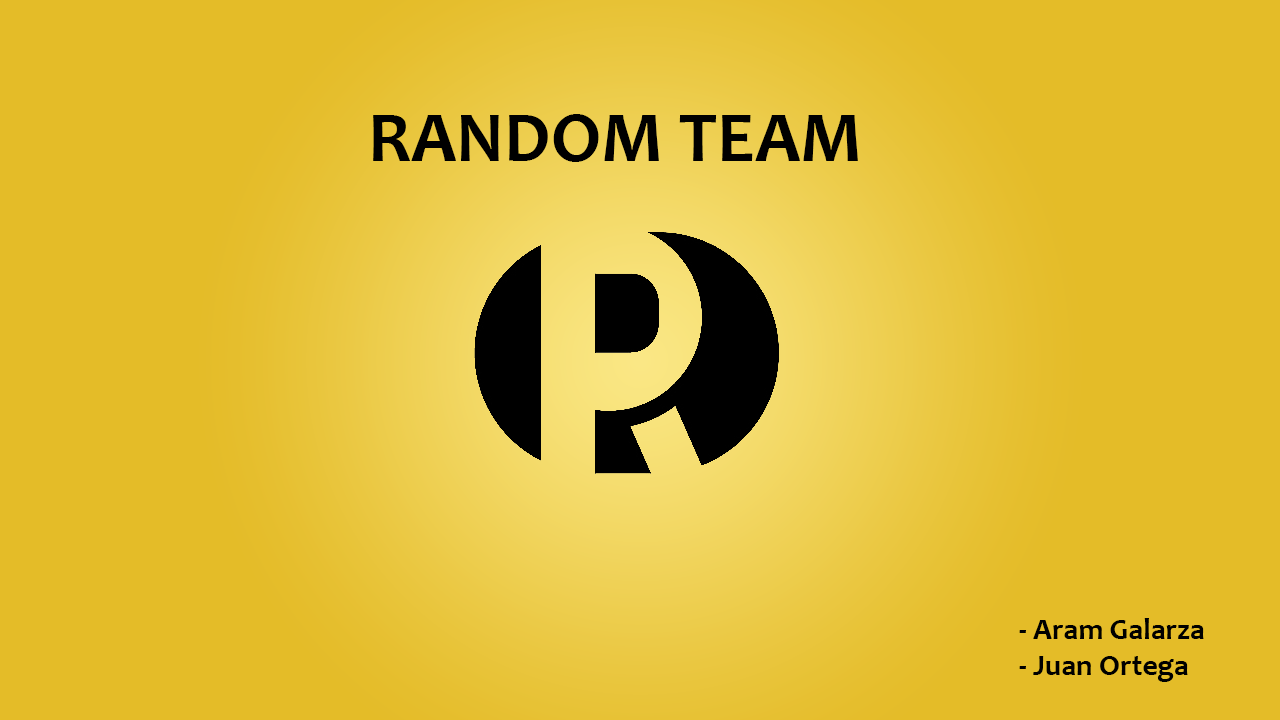
<style>
.page{position:relative;width:1280px;height:720px;background:#e4bc28}
.page>*{position:absolute;margin:0}
.t1{font:72px "Candara-Bold";color:#000000}
.t2{font:30px "Candara-Bold";color:#000000}
</style>
<div class="page">
<p class="t1" style="left:373px;top:114px;width:485px;height:48px">RANDOM TEAM</p>
<p class="t2" style="left:1019px;top:618px;width:185px;height:64px">- Aram Galarza<br>- Juan Ortega</p>
</div>
